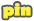
<style>
.page{position:relative;width:34px;height:21px;background:#ffffff}
.page>*{position:absolute;margin:0}
.t1{font:18px "BerlinSansFB-Bold";color:#fff338}
</style>
<div class="page">
<p class="t1" style="left:3px;top:3px;width:28px;height:16px">pin</p>
</div>
